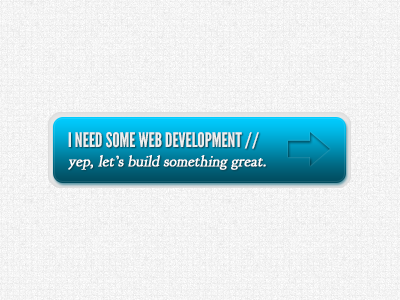
<style>
.page{position:relative;width:400px;height:300px}
.page>*{position:absolute;margin:0}
.t1{font:20px "LeagueGothic";color:#eeeeee}
.t2{font:15px "GoudyBookletter1911";color:#fefefe;font-weight:bold;font-style:italic}
</style>
<div class="page">
<p class="t1" style="left:68px;top:132px;width:191px;height:17px">I NEED SOME WEB DEVELOPMENT //</p>
<p class="t2" style="left:68px;top:155px;width:198px;height:15px">yep, let’s build something great.</p>
</div>
